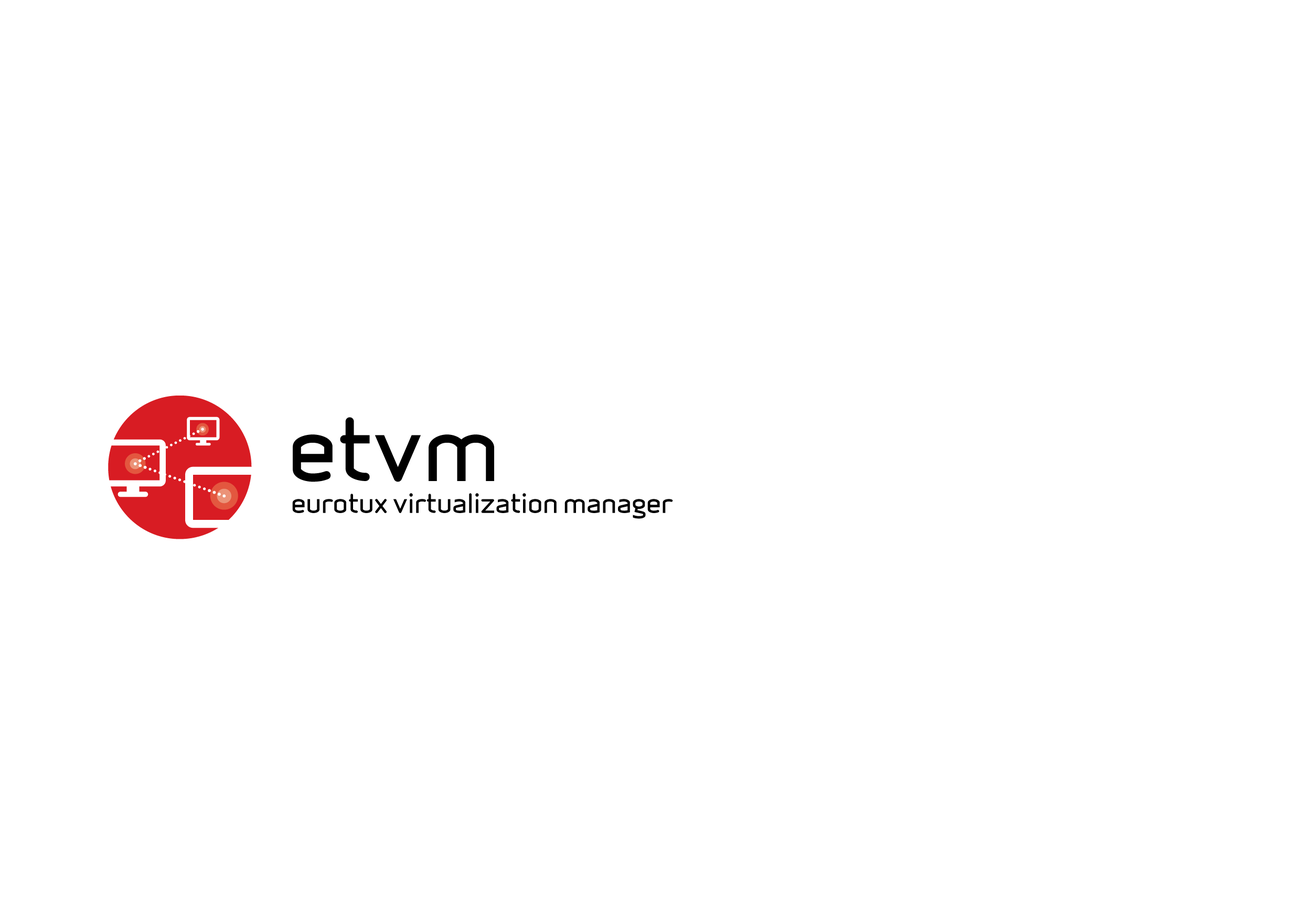
<style>
.page{position:relative;width:1301px;height:917px;background:#ffffff}
.page>*{position:absolute;margin:0}
.t1{font:83.6px "Infinity-Bold";color:#000000}
.t2{font:25.2px "Infinity-Bold";color:#000000}
</style>
<div class="page">
<p class="t1" style="left:293px;top:417px;width:201px;height:65px">etvm</p>
<p class="t2" style="left:292px;top:493px;width:381px;height:26px">eurotux virtualization manager</p>
</div>
